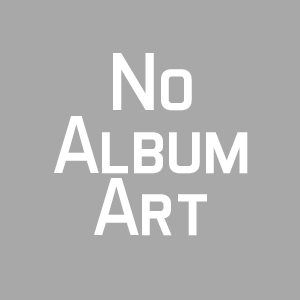
<style>
.page{position:relative;width:300px;height:300px;background:#a8a8a8}
.page>*{position:absolute;margin:0}
.t1{font:83.3px/62.4px "AeroMaticsDisplayRegular";color:#ffffff}
</style>
<div class="page">
<p class="t1" style="left:54px;top:53px;width:194px;height:183px;text-align:center">No<br>Album<br>Art</p>
</div>
